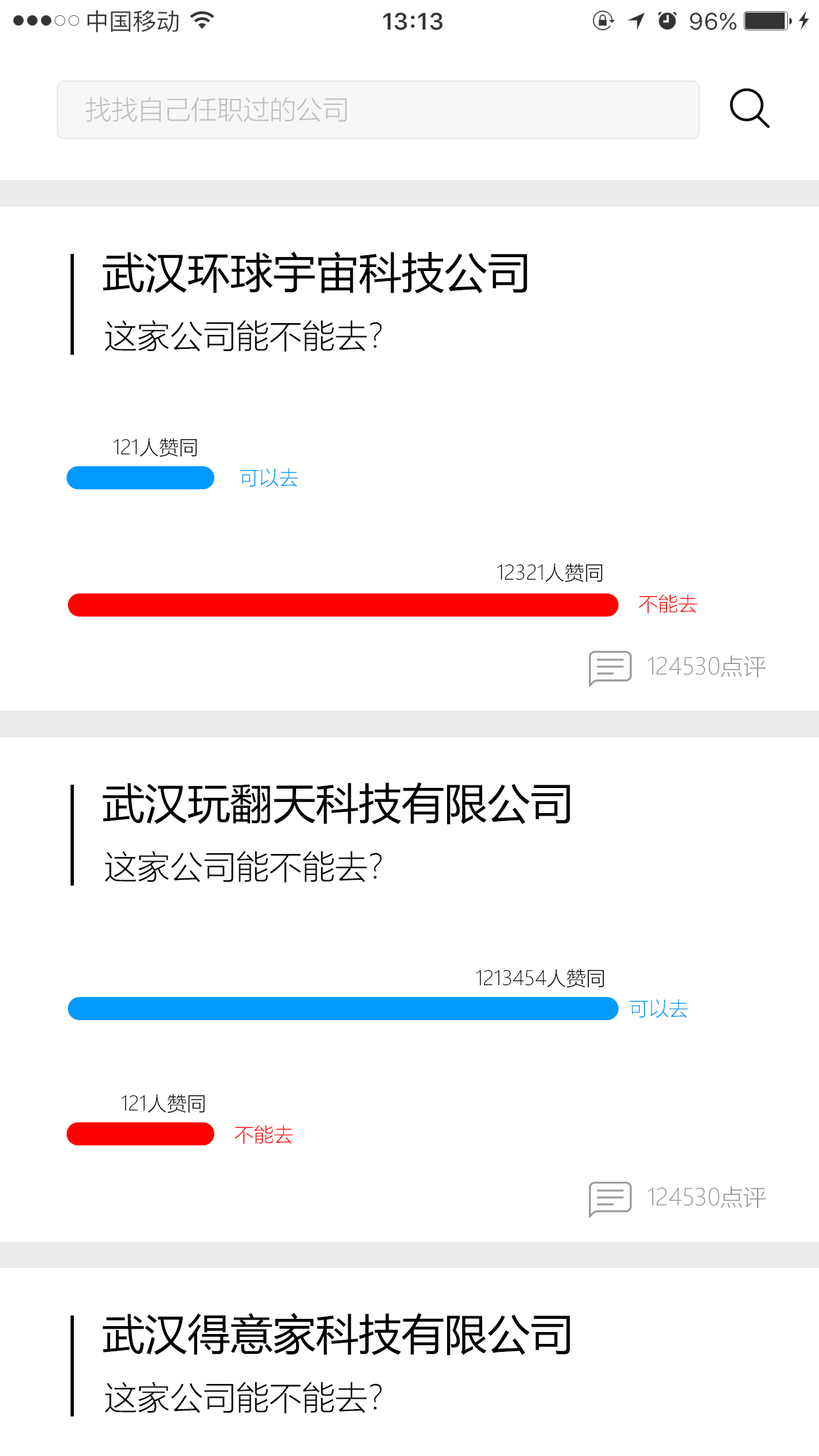
<style>
.page{position:relative;width:819px;height:1456px;background:#ffffff}
.page>*{position:absolute;margin:0}
.t1{font:26.4px "MicrosoftYaHeiLight";color:#bebebe}
.t2{font:42.9px "MicrosoftYaHei";color:#000000}
.t3{font:33px "MicrosoftYaHeiLight";color:#000000}
.t4{font:19.8px "MicrosoftYaHeiLight";color:#000000}
.t5{font:19.8px "MicrosoftYaHeiLight";color:#0099ff}
.t6{font:19.8px "MicrosoftYaHeiLight";color:#ff0000}
.t7{font:23.1px "MicrosoftYaHeiLight";color:#999999}
</style>
<div class="page">
<p class="t1" style="left:86px;top:97px;width:261px;height:25px">找找自己任职过的公司</p>
<p class="t2" style="left:102px;top:251px;width:426px;height:42px">武汉环球宇宙科技公司</p>
<p class="t3" style="left:105px;top:320px;width:277px;height:32px">这家公司能不能去?</p>
<p class="t4" style="left:113px;top:438px;width:84px;height:19px">121人赞同</p>
<p class="t5" style="left:240px;top:468px;width:58px;height:19px">可以去</p>
<p class="t4" style="left:497px;top:563px;width:106px;height:19px">12321人赞同</p>
<p class="t6" style="left:638px;top:594px;width:59px;height:19px">不能去</p>
<p class="t7" style="left:648px;top:655px;width:118px;height:23px">124530点评</p>
<p class="t2" style="left:102px;top:782px;width:468px;height:42px">武汉玩翻天科技有限公司</p>
<p class="t3" style="left:105px;top:851px;width:277px;height:32px">这家公司能不能去?</p>
<p class="t4" style="left:476px;top:969px;width:128px;height:19px">1213454人赞同</p>
<p class="t5" style="left:630px;top:999px;width:58px;height:19px">可以去</p>
<p class="t4" style="left:121px;top:1094px;width:84px;height:19px">121人赞同</p>
<p class="t6" style="left:234px;top:1125px;width:59px;height:19px">不能去</p>
<p class="t7" style="left:648px;top:1186px;width:118px;height:23px">124530点评</p>
<p class="t2" style="left:102px;top:1313px;width:468px;height:42px">武汉得意家科技有限公司</p>
<p class="t3" style="left:105px;top:1381px;width:277px;height:33px">这家公司能不能去?</p>
</div>
